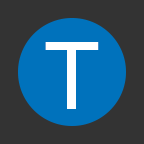
<style>
.page{position:relative;width:144px;height:144px;background:#333333}
.page>*{position:absolute;margin:0}
.t1{font:93.4px "TrebuchetMS";color:#ffffff}
</style>
<div class="page">
<p class="t1" style="left:45px;top:42px;width:54px;height:67px">T</p>
</div>
